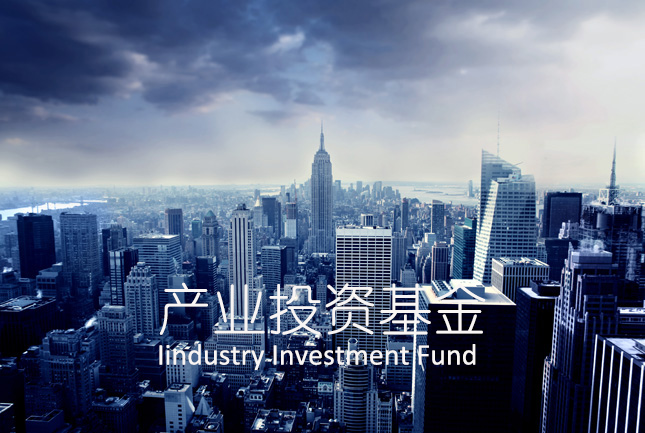
<style>
.page{position:relative;width:645px;height:433px}
.page>*{position:absolute;margin:0}
.t1{font:55px "YouYuan";color:#f8f5f4}
.t2{font:30px "Calibri";color:#f8f5f4}
</style>
<div class="page">
<p class="t1" style="left:160px;top:282px;width:326px;height:53px">产业投资基金</p>
<p class="t2" style="left:159px;top:344px;width:317px;height:26px">Iindustry Investment Fund</p>
</div>
